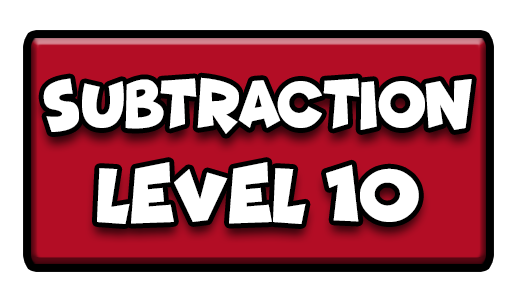
<style>
.page{position:relative;width:517px;height:301px;background:#ffffff}
.page>*{position:absolute;margin:0}
.t1{font:68.8px "Funhouse";color:#ffffff;scale:0.85 1}
.t2{font:77.7px "Funhouse";color:#ffffff;scale:0.95 1}
</style>
<div class="page">
<p class="t1" style="left:43px;top:77px;width:429px;height:57px">SUBTRACTION</p>
<p class="t2" style="left:97px;top:162px;width:322px;height:62px">LEVEL 10</p>
</div>
